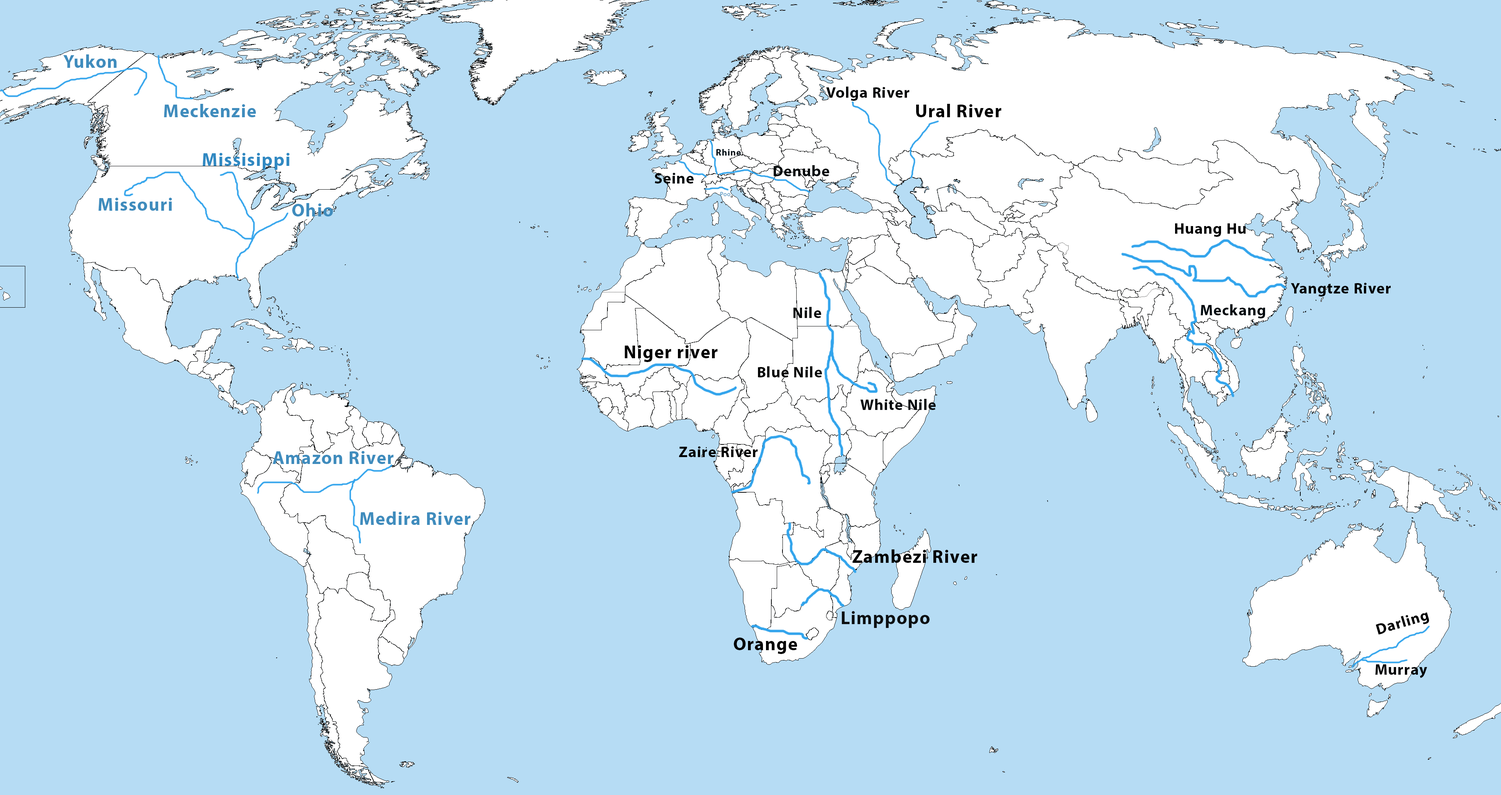
<style>
.page{position:relative;width:1501px;height:795px;background:#b6dcf4}
.page>*{position:absolute;margin:0}
.t1{font:18.4px "MyriadPro-Bold";letter-spacing:0.04em;color:#3f8cbd}
.t2{font:15.3px "MyriadPro-Bold";letter-spacing:0.04em;color:#000203}
.t3{font:18.4px "MyriadPro-Bold";letter-spacing:0.04em;color:#000000}
.t4{font:9.2px "MyriadPro-Bold";letter-spacing:0.04em;color:#020f17}
.t5{font:18.4px "MyriadPro-Bold";letter-spacing:0.04em;color:#3089c2}
.t6{font:15.3px "MyriadPro-Bold";letter-spacing:0.04em;color:#000609}
.t7{font:6.1px "MyriadPro-Regular";letter-spacing:0.04em;color:#3f8cbd}
.t8{font:15.3px "MyriadPro-Bold";letter-spacing:0.04em;color:#000000}
.t9{font:15.3px "MyriadPro-Bold";letter-spacing:0.04em;color:#00090f}
.t10{font:15.3px "MyriadPro-Bold";letter-spacing:0.04em;color:#06090a}
.t11{font:15.3px "MyriadPro-Bold";letter-spacing:0.04em;color:#030404}
.t12{font:15.3px "MyriadPro-Bold";letter-spacing:0.04em;color:#050a0e}
.t13{font:18.4px "MyriadPro-Bold";letter-spacing:0.04em;color:#0d1012}
.t14{font:15.3px "MyriadPro-Bold";letter-spacing:0.04em;color:#000204}
</style>
<div class="page">
<p class="t1" style="left:63px;top:54px;width:54px;height:14px">Yukon</p>
<p class="t2" style="left:826px;top:87px;width:83px;height:14px">Volga River</p>
<p class="t1" style="left:164px;top:104px;width:92px;height:13px">Meckenzie</p>
<p class="t3" style="left:916px;top:104px;width:85px;height:13px">Ural River</p>
<p class="t4" style="left:716px;top:149px;width:25px;height:6px">Rhine</p>
<p class="t5" style="left:203px;top:153px;width:86px;height:17px">Missisippi</p>
<p class="t6" style="left:654px;top:173px;width:39px;height:10px">Seine</p>
<p class="t6" style="left:774px;top:165px;width:55px;height:11px">Denube</p>
<p class="t1" style="left:98px;top:198px;width:74px;height:13px">Missouri</p>
<p class="t7" style="left:720px;top:192px;width:10px;height:4px">Poo</p>
<p class="t1" style="left:292px;top:203px;width:41px;height:13px">Ohio</p>
<p class="t8" style="left:1175px;top:223px;width:71px;height:14px">Huang Hu</p>
<p class="t8" style="left:1290px;top:283px;width:100px;height:13px">Yangtze River</p>
<p class="t9" style="left:1200px;top:304px;width:65px;height:14px">Meckang</p>
<p class="t10" style="left:793px;top:307px;width:28px;height:11px">Nile</p>
<p class="t3" style="left:625px;top:345px;width:93px;height:17px">Niger river</p>
<p class="t11" style="left:758px;top:366px;width:64px;height:11px">Blue Nile</p>
<p class="t12" style="left:860px;top:399px;width:75px;height:11px">White Nile</p>
<p class="t8" style="left:679px;top:446px;width:78px;height:11px">Zaire River</p>
<p class="t1" style="left:273px;top:451px;width:121px;height:13px">Amazon River</p>
<p class="t1" style="left:360px;top:511px;width:111px;height:14px">Medira River</p>
<p class="t3" style="left:852px;top:549px;width:125px;height:14px">Zambezi River</p>
<p class="t13" style="left:842px;top:611px;width:87px;height:17px">Limppopo</p>
<p class="t8" style="left:1375px;top:612px;width:54px;height:23px;rotate:-16deg">Darling</p>
<p class="t3" style="left:734px;top:637px;width:63px;height:17px">Orange</p>
<p class="t14" style="left:1375px;top:664px;width:52px;height:14px">Murray</p>
</div>
